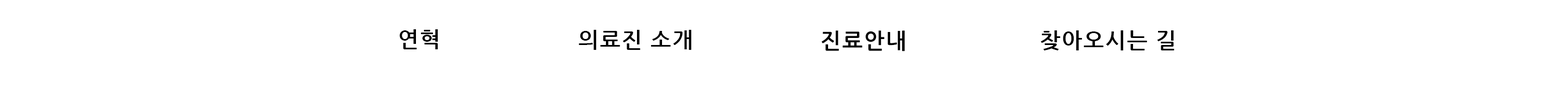
<style>
.page{position:relative;width:1568px;height:103px;background:#ffffff}
.page>*{position:absolute;margin:0}
.t1{font:21.8px "NanumGothicBold";letter-spacing:0.06em;color:#000000}
.t2{font:22px "NanumGothicBold";letter-spacing:0.06em;color:#000000}
</style>
<div class="page">
<p class="t1" style="left:400px;top:29px;width:38px;height:21px">연혁</p>
<p class="t1" style="left:579px;top:30px;width:112px;height:20px">의료진 소개</p>
<p class="t2" style="left:822px;top:30px;width:83px;height:22px">진료안내</p>
<p class="t1" style="left:1040px;top:30px;width:134px;height:21px">찾아오시는 길</p>
</div>
